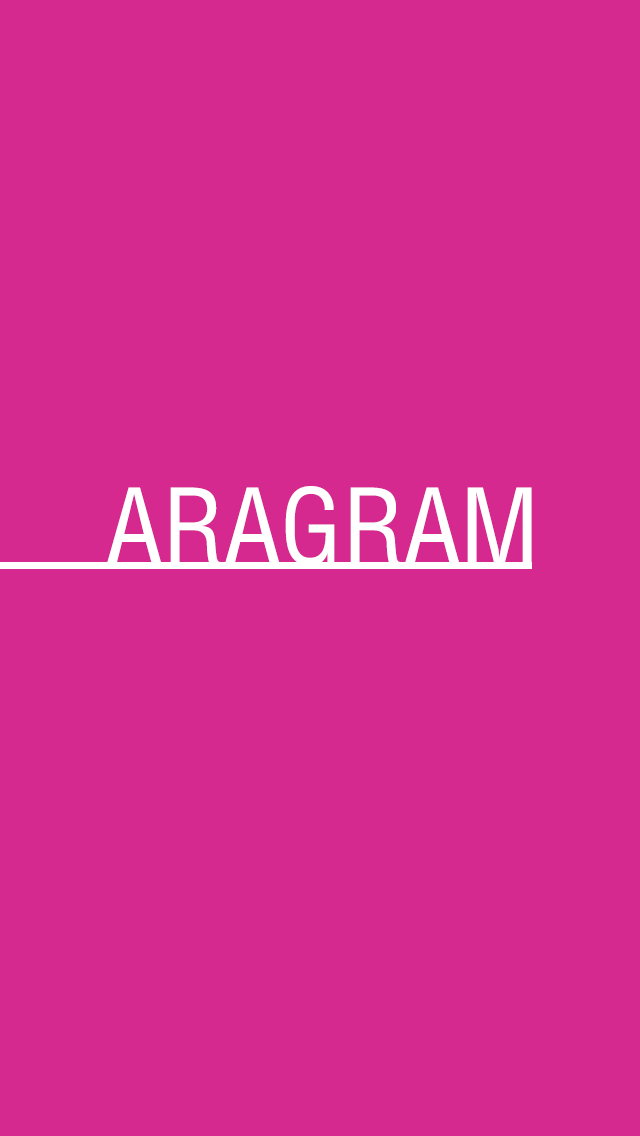
<style>
.page{position:relative;width:640px;height:1136px;background:#d62990}
.page>*{position:absolute;margin:0}
.t1{font:101.3px "Helvetica-Condensed";color:#ffffff}
</style>
<div class="page">
<p class="t1" style="left:107px;top:486px;width:425px;height:80px">ARAGRAM</p>
</div>
